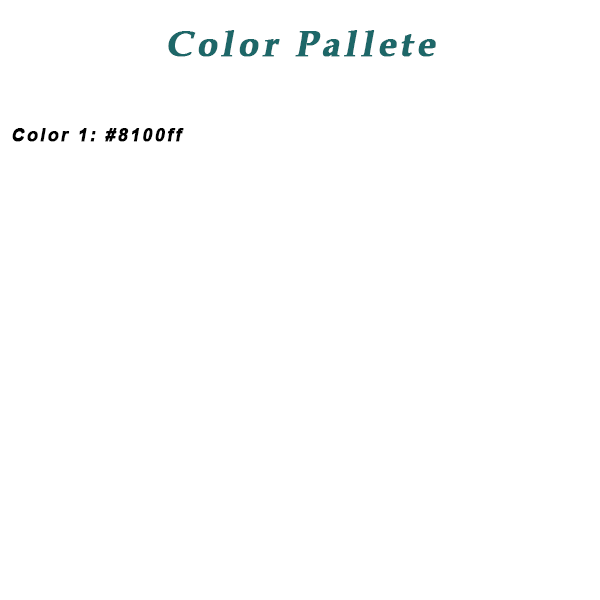
<style>
.page{position:relative;width:600px;height:600px;background:#ffffff}
.page>*{position:absolute;margin:0}
.t1{font:36px "BookAntiqua-Bold";letter-spacing:0.1em;color:#1d6768;font-weight:bold;font-style:italic}
.t2{font:18px "Arial-BoldMT";letter-spacing:0.1em;color:#000000;font-weight:bold;font-style:italic}
</style>
<div class="page">
<p class="t1" style="left:168px;top:30px;width:268px;height:27px">Color Pallete</p>
<p class="t2" style="left:12px;top:128px;width:172px;height:14px">Color 1: #8100ff</p>
</div>
